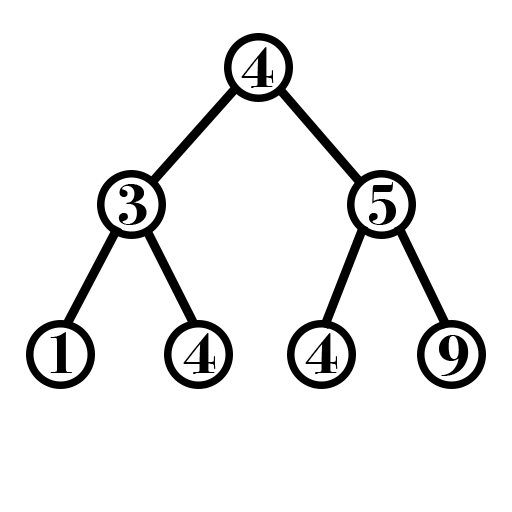
<style>
.page{position:relative;width:512px;height:512px;background:#ffffff}
.page>*{position:absolute;margin:0}
.t1{font:60px "BodoniSvtyTwoITCTT-Bold";color:#000000}
</style>
<div class="page">
<p class="t1" style="left:241px;top:47px;width:33px;height:41px">4</p>
<p class="t1" style="left:118px;top:184px;width:29px;height:41px">3</p>
<p class="t1" style="left:369px;top:182px;width:27px;height:43px">5</p>
<p class="t1" style="left:50px;top:332px;width:22px;height:41px">1</p>
<p class="t1" style="left:183px;top:333px;width:33px;height:41px">4</p>
<p class="t1" style="left:305px;top:333px;width:33px;height:41px">4</p>
<p class="t1" style="left:439px;top:335px;width:30px;height:41px">9</p>
</div>
